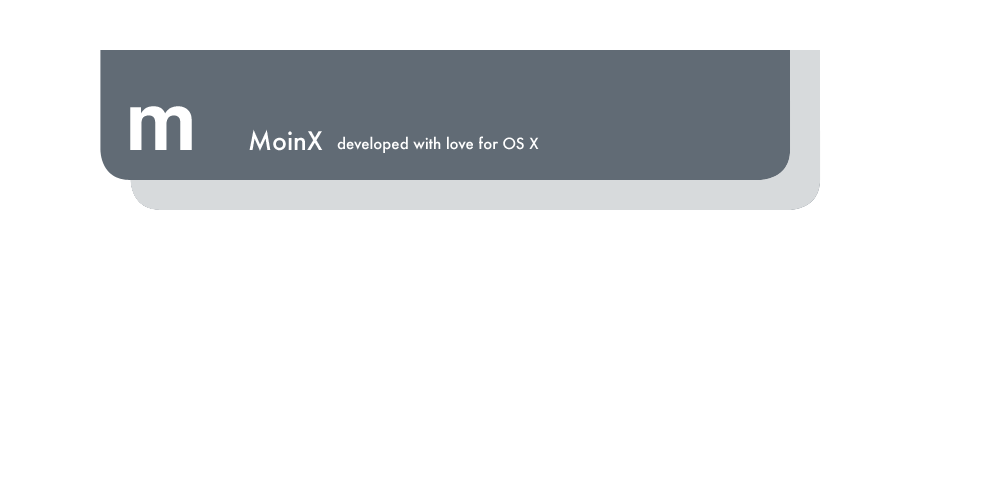
<style>
.page{position:relative;width:1000px;height:500px;background:#ffffff}
.page>*{position:absolute;margin:0}
.t1{font:80px "Helvetica-Bold";color:#ffffff}
.t2{font:25px "Futura-Medium";color:#ffffff}
.t3{font:15px "Futura-Medium";color:#ffffff}
</style>
<div class="page">
<p class="t1" style="left:130px;top:106px;width:62px;height:44px">m</p>
<p class="t2" style="left:249px;top:129px;width:74px;height:22px">MoinX</p>
<p class="t3" style="left:337px;top:136px;width:202px;height:17px">developed with love for OS X</p>
</div>
